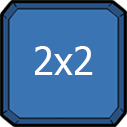
<style>
.page{position:relative;width:127px;height:127px;background:#3b74b2}
.page>*{position:absolute;margin:0}
.t1{font:38px "Tahoma";color:#ffffff}
</style>
<div class="page">
<p class="t1" style="left:35px;top:46px;width:58px;height:29px">2x2</p>
</div>
